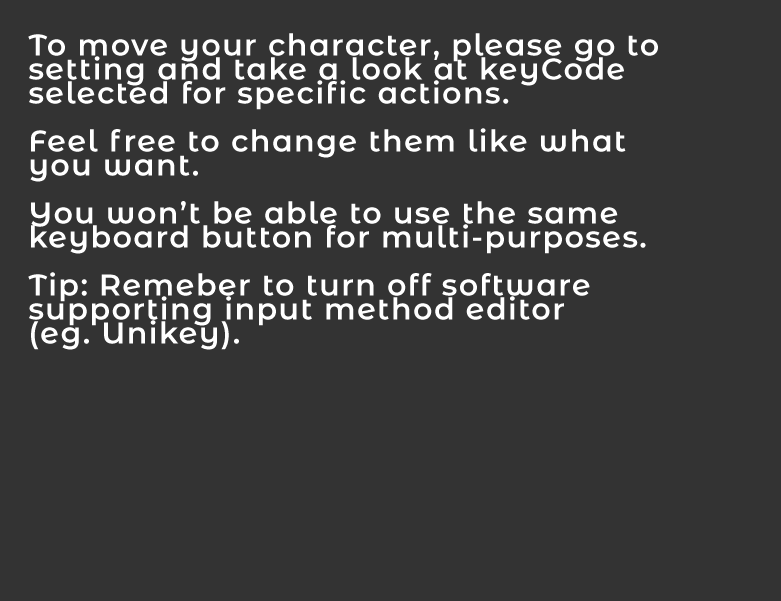
<style>
.page{position:relative;width:781px;height:601px;background:#333333}
.page>*{position:absolute;margin:0}
.t1{font:30px/24px "MontserratAlternates-SemiBold";letter-spacing:0.05em;color:#ffffff}
</style>
<div class="page">
<p class="t1" style="left:28px;top:33px;width:630px;height:317px">To move your character, please go to <br>setting and take a look at keyCode <br>selected for specific actions. <br><br>Feel free to change them like what <br>you want. <br><br>You won’t be able to use the same <br>keyboard button for multi-purposes.<br><br>Tip: Remeber to turn off software <br>supporting input method editor<br>(eg. Unikey).</p>
</div>
